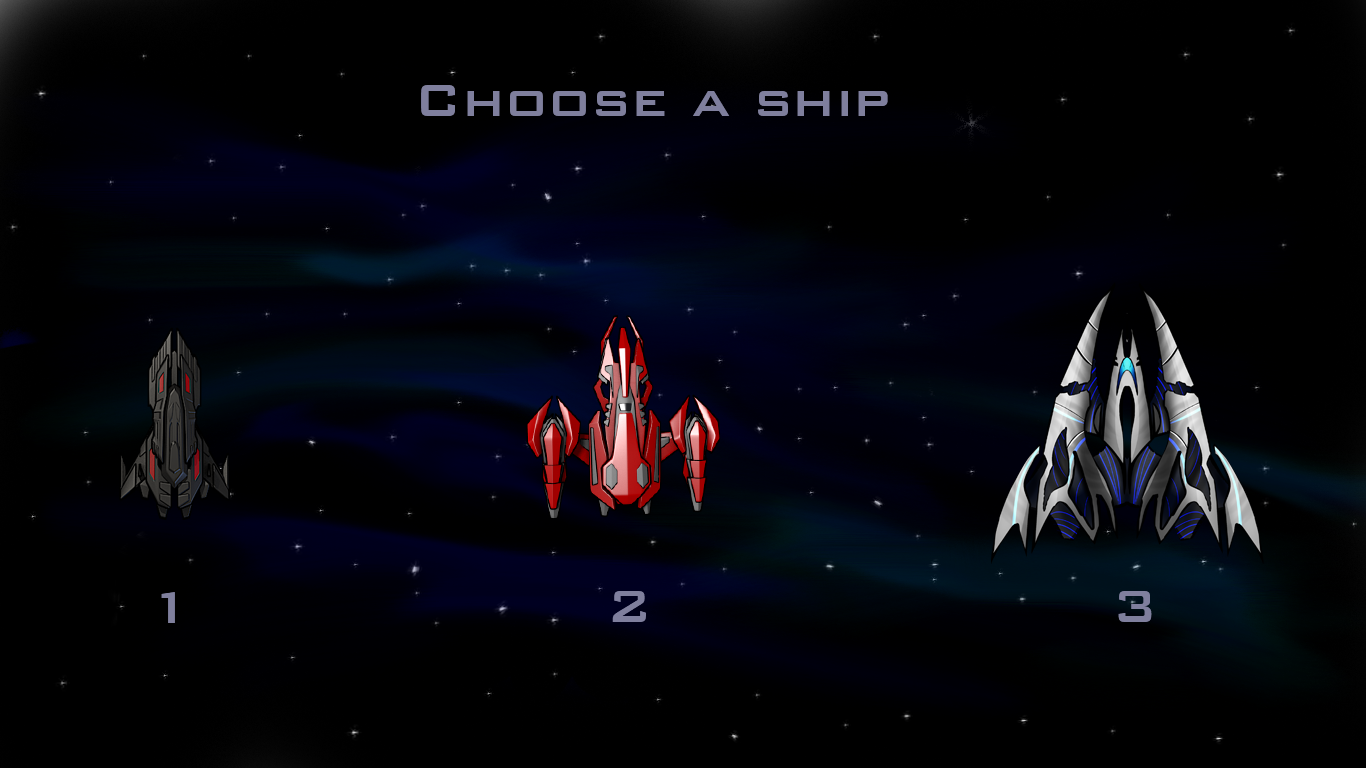
<style>
.page{position:relative;width:1366px;height:768px;background:#000000}
.page>*{position:absolute;margin:0}
.t1{font:60px "BankGothicBT-Medium";color:#7f7f9d}
</style>
<div class="page">
<p class="t1" style="left:421px;top:85px;width:467px;height:31px">Choose a ship</p>
<p class="t1" style="left:161px;top:592px;width:14px;height:31px">1</p>
<p class="t1" style="left:612px;top:591px;width:34px;height:31px">2</p>
<p class="t1" style="left:1118px;top:591px;width:34px;height:31px">3</p>
</div>
